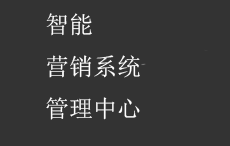
<style>
.page{position:relative;width:230px;height:146px;background:#333333}
.page>*{position:absolute;margin:0}
.t1{font:24px "SimSun";color:#ffffff}
</style>
<div class="page">
<p class="t1" style="left:46px;top:13px;width:94px;height:107px">智能<br>营销系统<br>管理中心</p>
</div>
